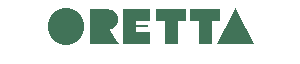
<style>
.page{position:relative;width:300px;height:64px;background:#ffffff}
.page>*{position:absolute;margin:0}
.t1{font:50px "Flegrei-Regular";letter-spacing:0.02em;color:#417358}
</style>
<div class="page">
<p class="t1" style="left:48px;top:8px;width:206px;height:37px">ORETTA</p>
</div>
